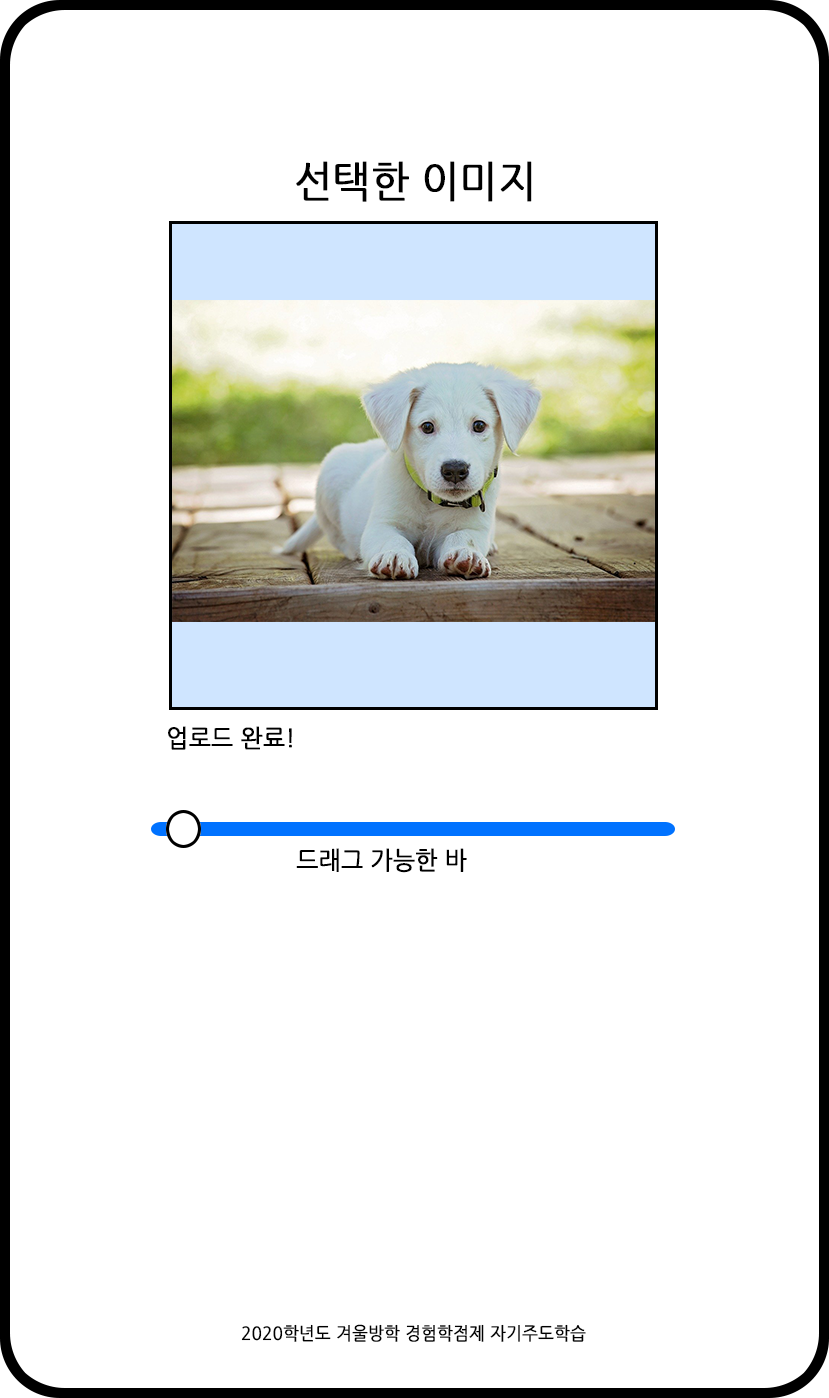
<style>
.page{position:relative;width:829px;height:1398px;background:#ffffff}
.page>*{position:absolute;margin:0}
.t1{font:42.7px "NanumGothic";color:#000000;font-weight:bold;scale:0.93 1}
.t2{font:24.9px "NanumGothic";color:#000000;font-weight:bold;scale:0.93 1}
.t3{font:25px "NanumGothic";color:#000000;font-weight:bold;scale:0.93 1}
.t4{font:17.9px "NanumGothic";color:#000000;font-weight:bold;scale:0.92 1}
</style>
<div class="page">
<p class="t1" style="left:296px;top:161px;width:236px;height:41px">선택한 이미지</p>
<p class="t2" style="left:168px;top:726px;width:124px;height:24px">업로드 완료!</p>
<p class="t3" style="left:296px;top:848px;width:171px;height:25px">드래그 가능한 바</p>
<p class="t4" style="left:241px;top:1324px;width:345px;height:18px">2020학년도 겨울방학 경험학점제 자기주도학습</p>
</div>
